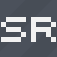
<style>
.page{position:relative;width:57px;height:57px;background:#474d56}
.page>*{position:absolute;margin:0}
.t1{font:40px "automat";color:#f1f1f1}
</style>
<div class="page">
<p class="t1" style="left:1px;top:17px;width:55px;height:25px">SR</p>
</div>
